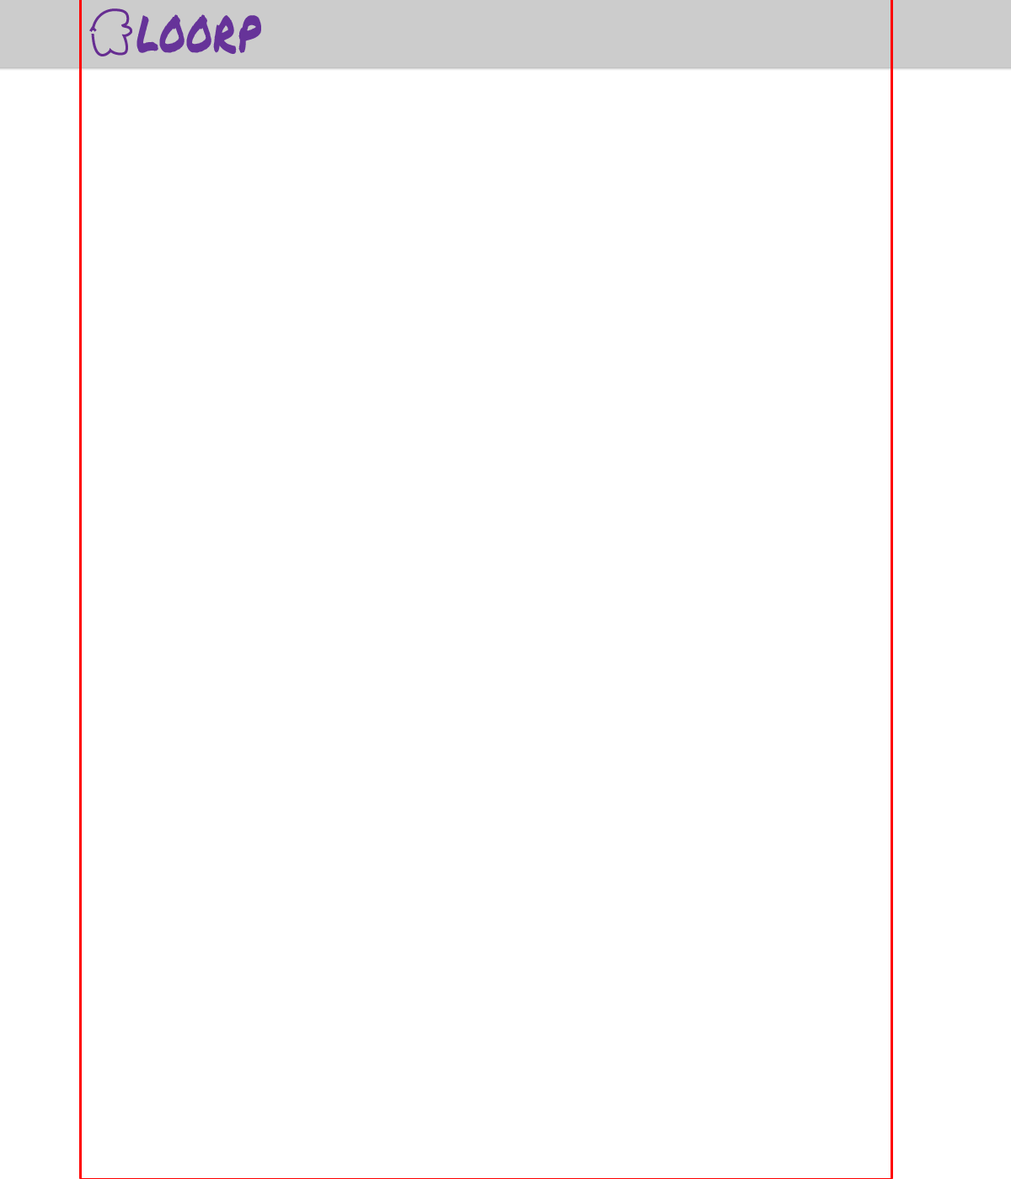
<style>
.page{position:relative;width:1011px;height:1179px;background:#ffffff}
.page>*{position:absolute;margin:0}
.t1{font:50.5px "PermanentMarker";letter-spacing:0.025em;color:#663399;scale:0.7 1}
</style>
<div class="page">
<p class="t1" style="left:136px;top:14px;width:125px;height:41px">LOORP</p>
</div>
